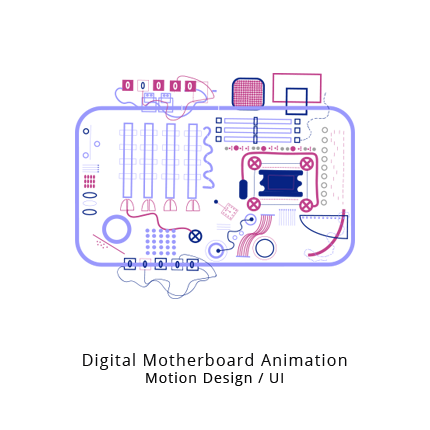
<style>
.page{position:relative;width:430px;height:430px;background:#ffffff}
.page>*{position:absolute;margin:0}
.t1{font:16px "OpenSans";letter-spacing:0.075em;color:#09090a}
.t2{font:14px "OpenSans";letter-spacing:0.075em;color:#09090a}
</style>
<div class="page">
<p class="t1" style="left:83px;top:353px;width:264px;height:33px;text-align:center">Digital Motherboard Animation<br><span class="t2">Motion Design / UI</span></p>
</div>
